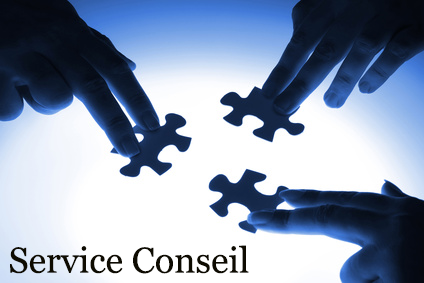
<style>
.page{position:relative;width:424px;height:283px;background:#ffffff}
.page>*{position:absolute;margin:0}
.t1{font:36px "Georgia";color:#0e0b01}
.t2{font:18px "GujaratiSangamMN";color:#0e0b01}
</style>
<div class="page">
<p class="t1" style="left:10px;top:245px;width:239px;height:29px"><span class="t2"><br><br></span>Service Conseil</p>
</div>
